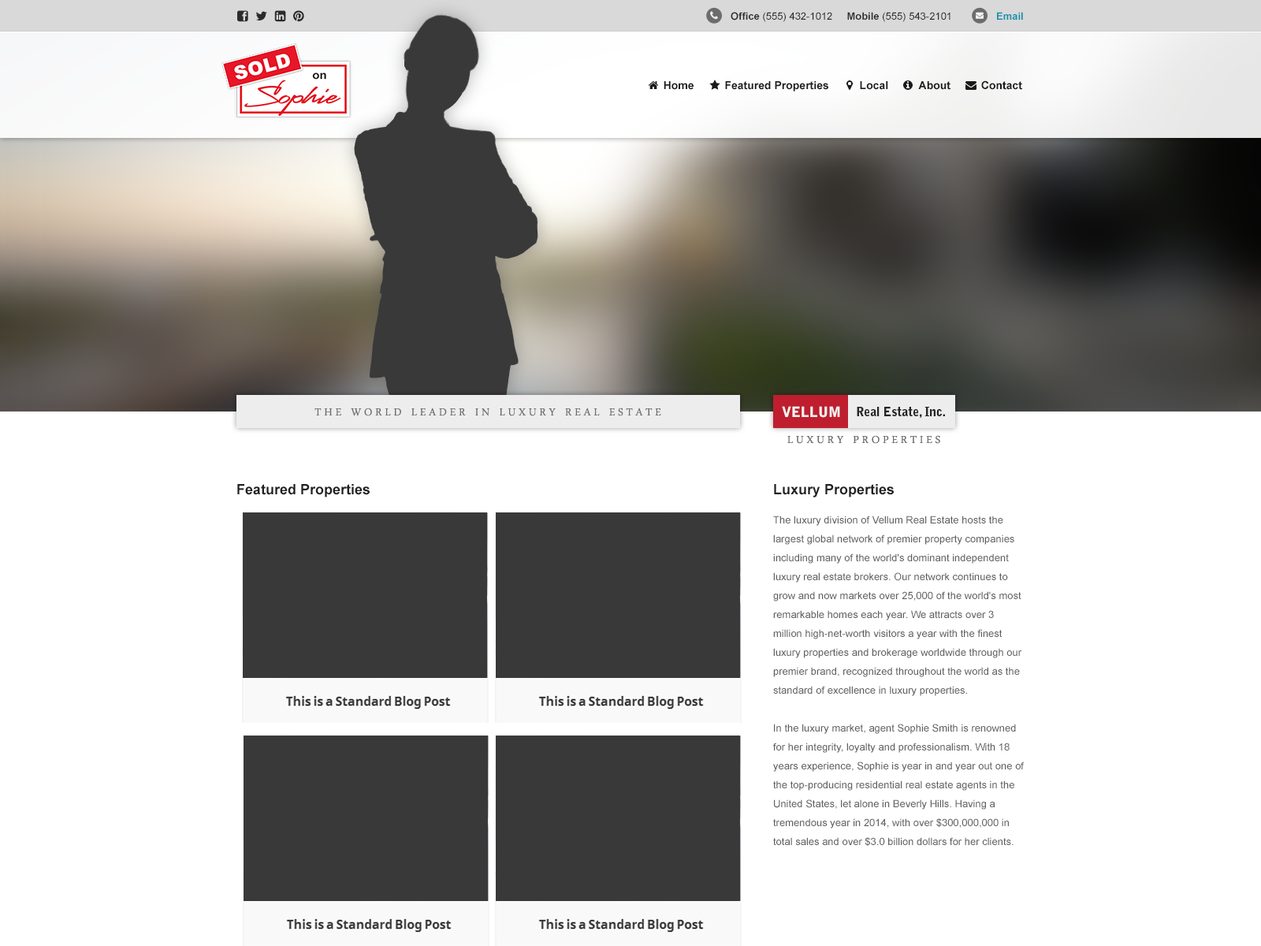
<style>
.page{position:relative;width:1261px;height:946px;background:#ffffff}
.page>*{position:absolute;margin:0}
.t1{font:10.2px "ArialMT";color:#2b2b2b}
.t2{font:10.2px "Arial-BoldMT";color:#2b2b2b}
.t3{font:10.2px "Arial-BoldMT";color:#098fad}
.t4{font:11px "Arial-BoldMT";color:#1a1a1a}
.t5{font:14.2px "Arial-BoldMT";color:#202020}
.t6{font:10.2px/18.9px "ArialMT";color:#606060}
</style>
<div class="page">
<p class="t1" style="left:731px;top:12px;width:219px;height:10px"><span class="t2">Office</span> (555) 432-1012     <span class="t2">Mobile</span> (555) 543-2101</p>
<p class="t3" style="left:997px;top:12px;width:26px;height:8px">Email</p>
<p class="t4" style="left:664px;top:80px;width:358px;height:11px">Home          Featured Properties          Local          About          Contact</p>
<p class="t5" style="left:237px;top:484px;width:133px;height:13px">Featured Properties</p>
<p class="t5" style="left:774px;top:484px;width:120px;height:13px">Luxury Properties</p>
<p class="t6" style="left:773px;top:515px;width:251px;height:331px">The luxury division of Vellum Real Estate hosts the largest global network of premier property companies including many of the world's dominant independent luxury real estate brokers. Our network continues to grow and now markets over 25,000 of the world's most remarkable homes each year. We attracts over 3 million high-net-worth visitors a year with the finest luxury properties and brokerage worldwide through our premier brand, recognized throughout the world as the standard of excellence in luxury properties.<br><br>In the luxury market, agent Sophie Smith is renowned for her integrity, loyalty and professionalism. With 18 years experience, Sophie is year in and year out one of the top-producing residential real estate agents in the United States, let alone in Beverly Hills. Having a tremendous year in 2014, with over $300,000,000 in total sales and over $3.0 billion dollars for her clients.</p>
</div>
